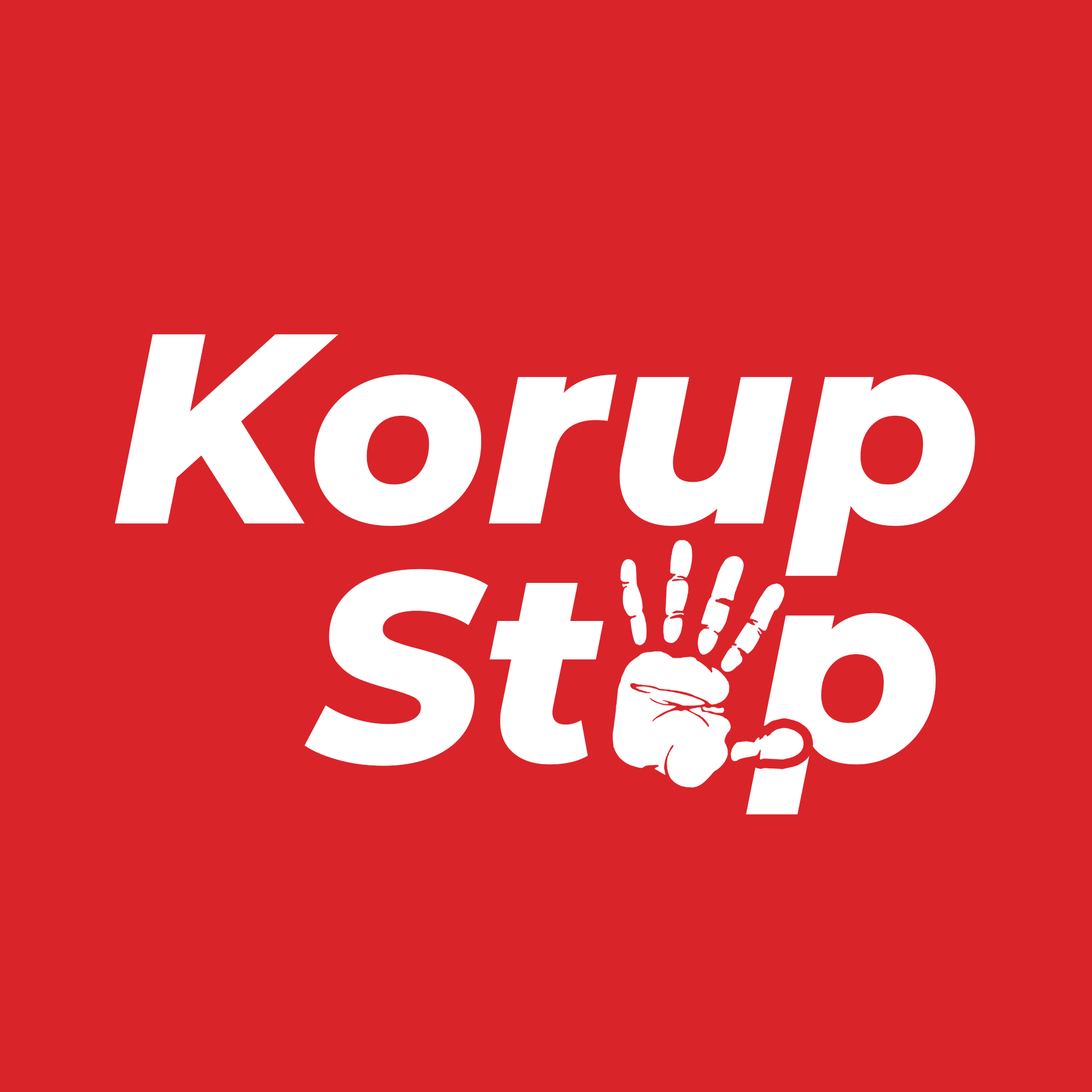
<style>
.page{position:relative;width:1092px;height:1092px;background:#d9242a}
.page>*{position:absolute;margin:0}
.t1{font:270px "Montserrat-ExtraBoldItalic";color:#ffffff}
</style>
<div class="page">
<p class="t1" style="left:115px;top:334px;width:860px;height:242px">Korup</p>
<p class="t1" style="left:305px;top:569px;width:299px;height:197px">St</p>
<p class="t1" style="left:746px;top:613px;width:190px;height:202px">p</p>
</div>
